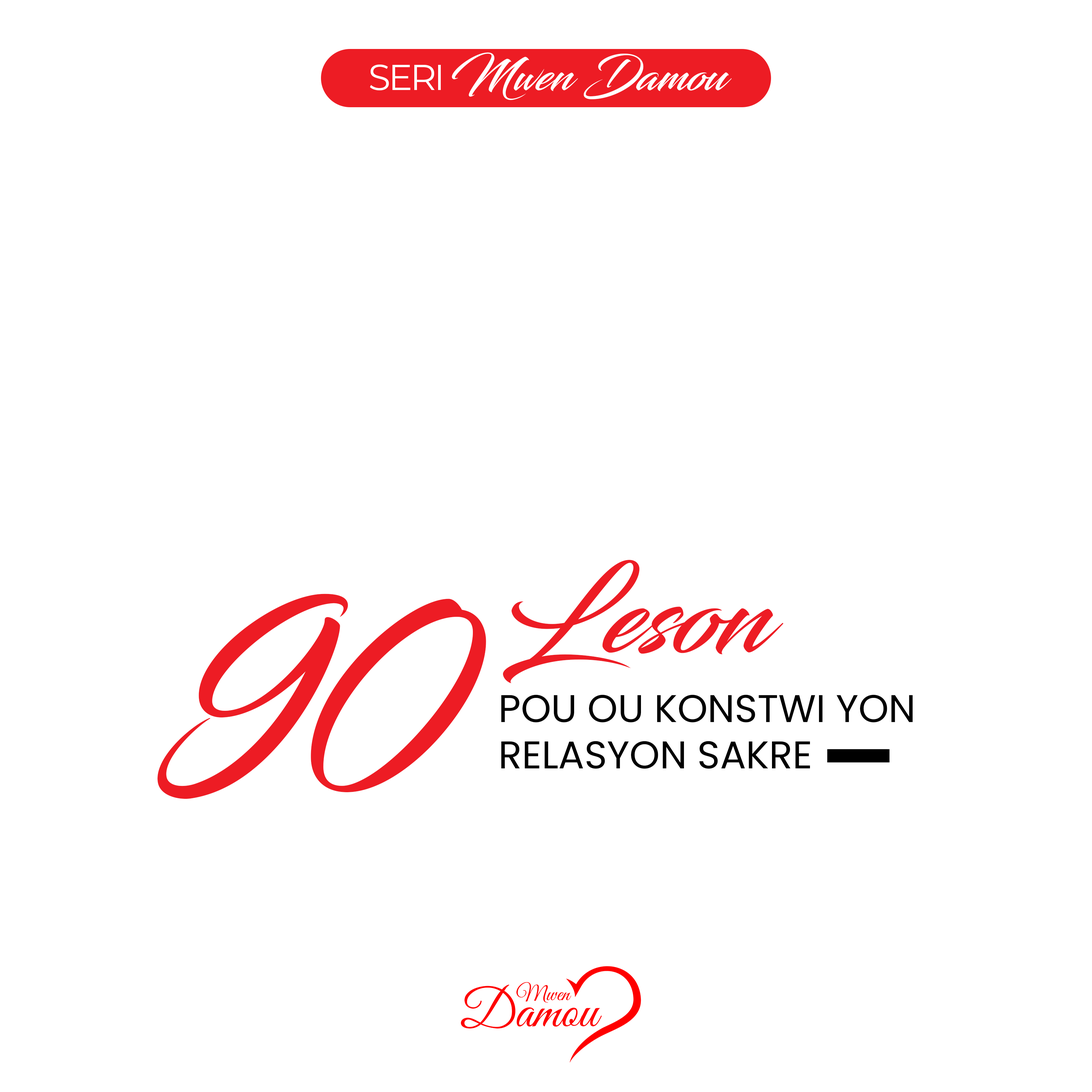
<style>
.page{position:relative;width:1092px;height:1092px;background:#ffffff}
.page>*{position:absolute;margin:0}
.t1{font:44.5px "Blacksword";color:#ffffff}
.t2{font:36px "Montserrat-Regular";letter-spacing:-0.06em;color:#ffffff;text-transform:uppercase}
.t3{font:110.3px "Blacksword";color:#ed1c24}
.t4{font:219.2px "Blacksword";color:#ed1c24}
.t5{font:38.6px "Poppins-Regular";color:#000000;text-transform:uppercase}
</style>
<div class="page">
<p class="t1" style="left:370px;top:52px;width:362px;height:48px"><span class="t2">Seri </span>Mwen Damou</p>
<p class="t3" style="left:503px;top:560px;width:280px;height:123px">Leson</p>
<p class="t4" style="left:158px;top:594px;width:328px;height:205px">90</p>
<p class="t5" style="left:501px;top:695px;width:412px;height:74px">Pou ou konstwi yon<br>relasyon sakre</p>
</div>
